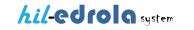
<style>
.page{position:relative;width:194px;height:30px;background:#ffffff}
.page>*{position:absolute;margin:0}
.t1{font:28px "Bauhaus93";letter-spacing:0.02em;color:#346699}
.t2{font:28px "HarlowSolid";letter-spacing:0.02em;color:#29aae1}
.t3{font:28px "HarlowSolid";letter-spacing:0.02em;color:#000000}
.t4{font:16px "Chiller-Regular";letter-spacing:0.02em;color:#000000}
</style>
<div class="page">
<p class="t1" style="left:17px;top:4px;width:119px;height:20px"><span class="t2">hil</span><span class="t3">-</span>edrola</p>
<p class="t4" style="left:140px;top:14px;width:33px;height:12px">system</p>
</div>
